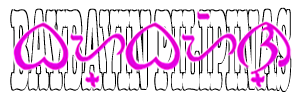
<style>
.page{position:relative;width:300px;height:100px;background:#ffffff}
.page>*{position:absolute;margin:0}
.t1{font:116.5px "AmericanTypewriter-Bold";letter-spacing:-0.02em;color:#ffffff;scale:0.21 1}
</style>
<div class="page">
<p class="t1" style="left:11px;top:9px;width:280px;height:83px">BAYBAYIN PILIPINAS</p>
<p class="t1" style="left:11px;top:8px;width:280px;height:83px">BAYBAYIN PILIPINAS</p>
</div>
